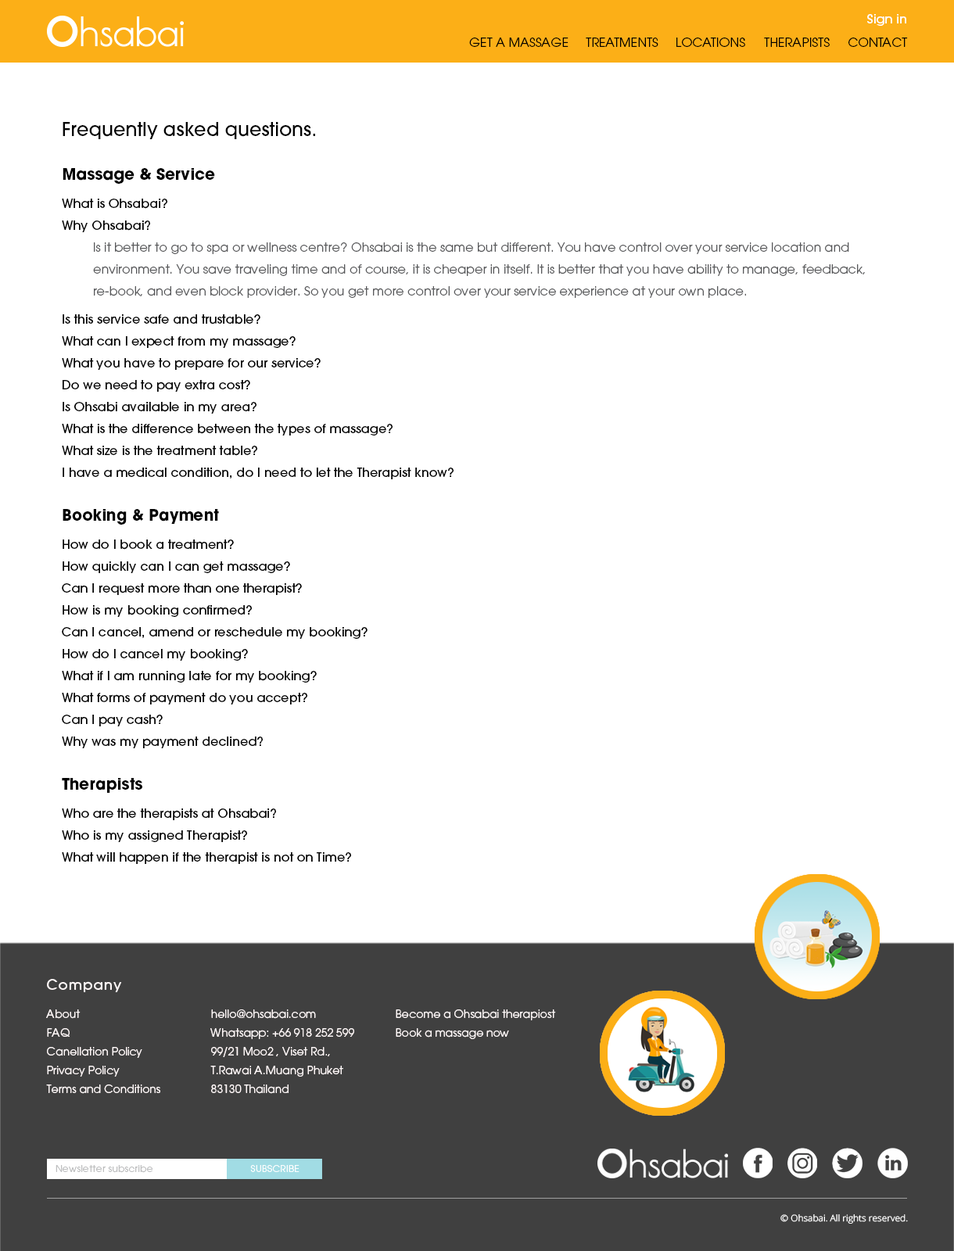
<style>
.page{position:relative;width:954px;height:1251px;background:#ffffff}
.page>*{position:absolute;margin:0}
.t1{font:12.5px/21.9px "ITCAvantGardePro-Bk";color:#58595b}
.t2{font:18.8px/21.9px "ITCAvantGardePro-Md";color:#000000}
.t3{font:15.6px/21.9px "ITCAvantGardePro-Bold";color:#000000}
.t4{font:12.5px/28.1px "ITCAvantGardePro-Md";color:#000000}
.t5{font:12.5px/21.9px "ITCAvantGardePro-Md";color:#000000}
</style>
<div class="page">
<p class="t1" style="left:62px;top:122px;width:802px;height:742px"><span class="t2">Frequently asked questions.<br><br></span><span class="t3">Massage &amp; Service<br></span><span class="t4">What is Ohsabai?<br></span><span class="t5">Why Ohsabai?<br></span>Is it better to go to spa or wellness centre? Ohsabai is the same but different. You have control over your service location and <br>environment. You save traveling time and of course, it is cheaper in itself. It is better that you have ability to manage, feedback, <br>re-book, and even block provider. So you get more control over your service experience at your own place.<br><span class="t4">Is this service safe and trustable?<br></span><span class="t5">What can I expect from my massage?<br>What you have to prepare for our service?<br>Do we need to pay extra cost?<br>Is Ohsabi available in my area?<br>What is the difference between the types of massage?<br>What size is the treatment table?<br>I have a medical condition, do I need to let the Therapist know?<br><br></span><span class="t3">Booking &amp; Payment<br></span><span class="t4">How do I book a treatment?<br></span><span class="t5">How quickly can I can get massage?<br>Can I request more than one therapist?<br>How is my booking confirmed?<br>Can I cancel, amend or reschedule my booking?<br>How do I cancel my booking?<br>What if I am running late for my booking?<br>What forms of payment do you accept?<br>Can I pay cash?<br>Why was my payment declined?<br><br></span><span class="t3">Therapists<br></span><span class="t4">Who are the therapists at Ohsabai?<br></span><span class="t5">Who is my assigned Therapist?<br>What will happen if the therapist is not on Time?</span></p>
</div>
